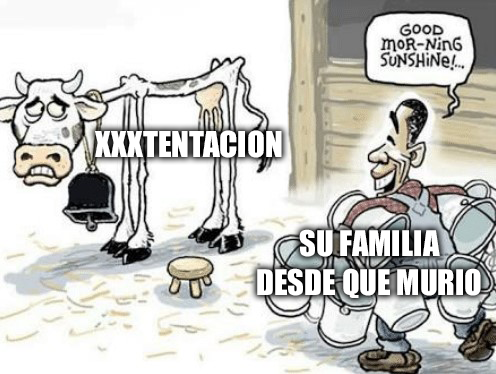
<style>
.page{position:relative;width:496px;height:374px}
.page>*{position:absolute;margin:0}
.t1{font:32.7px "Impact";color:#ffffff}
.t2{font:32.5px "Impact";color:#ffffff}
</style>
<div class="page">
<p class="t1" style="left:95px;top:130px;width:187px;height:28px">XXXTENTACION</p>
<p class="t2" style="left:257px;top:229px;width:224px;height:69px;text-align:center">SU FAMILIA<br>DESDE QUE MURIO</p>
</div>
